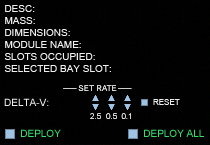
<style>
.page{position:relative;width:210px;height:145px}
.page>*{position:absolute;margin:0}
.t1{font:10px/12px "ArialMT";color:#eeeeee}
.t2{font:10px "ArialMT";color:#eeeeee}
.t3{font:8px "ArialMT";color:#eeeeee;font-variant:small-caps}
.t4{font:10px "ArialMT";color:#35de69}
</style>
<div class="page">
<p class="t1" style="left:4px;top:5px;width:107px;height:67px">DESC:<br>MASS:<br>DIMENSIONS:<br>MODULE NAME:<br>SLOTS OCCUPIED:<br>SELECTED BAY SLOT:</p>
<p class="t2" style="left:4px;top:98px;width:45px;height:8px">DELTA-V:</p>
<p class="t3" style="left:153px;top:99px;width:27px;height:6px">RESET</p>
<p class="t4" style="left:21px;top:129px;width:40px;height:8px">DEPLOY</p>
<p class="t4" style="left:144px;top:129px;width:60px;height:8px">DEPLOY ALL</p>
</div>
